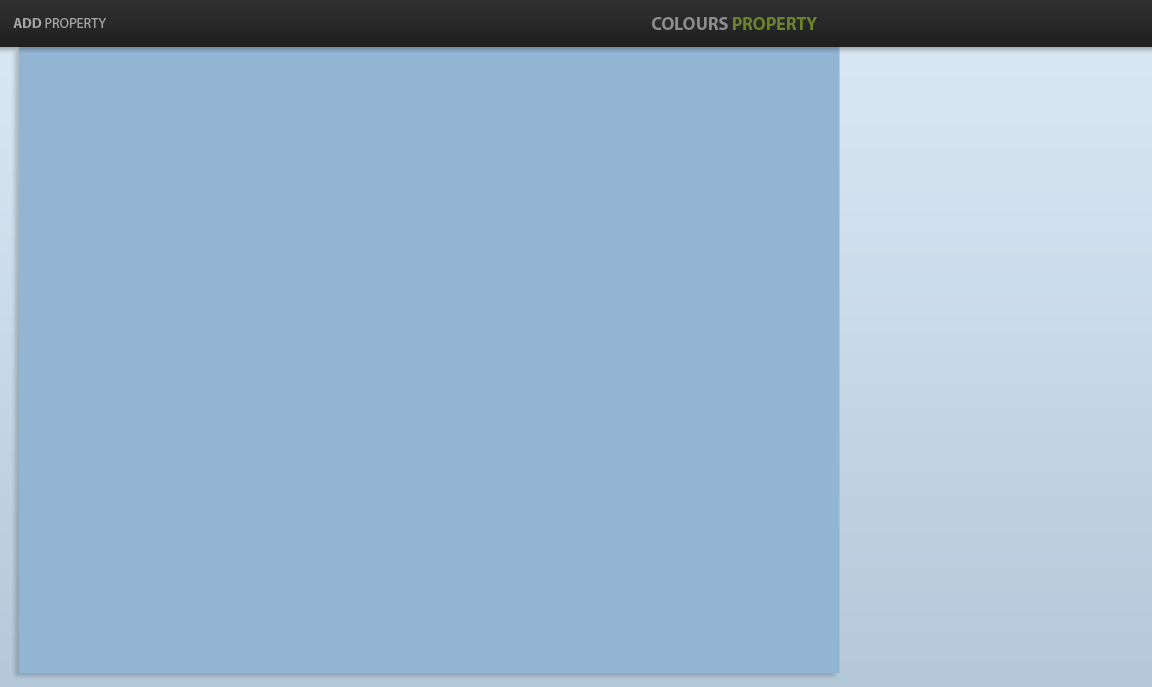
<style>
.page{position:relative;width:1152px;height:687px;background:#92b5d3}
.page>*{position:absolute;margin:0}
.t1{font:18px "MyriadPro-Bold"}
.t2{font:14px "MyriadPro-Regular";color:#a7a5a5}
.t3{font:14px "MyriadPro-Bold";color:#a7a5a5}
</style>
<div class="page">
<p class="t1" style="left:652px;top:17px;width:165px;height:13px">COLOURS PROPERTY</p>
<p class="t2" style="left:13px;top:18px;width:93px;height:10px"><span class="t3">ADD </span>PROPERTY</p>
</div>
